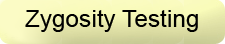
<style>
.page{position:relative;width:225px;height:44px}
.page>*{position:absolute;margin:0}
.t1{font:22.6px "ArialMT";color:#000000;scale:1.08 1}
</style>
<div class="page">
<p class="t1" style="left:25px;top:10px;width:173px;height:22px">Zygosity Testing</p>
</div>
